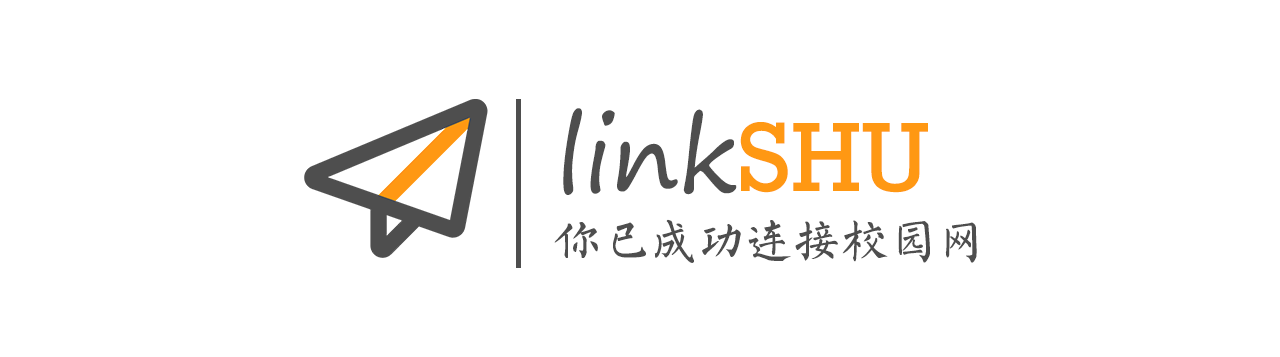
<style>
.page{position:relative;width:1280px;height:357px;background:#ffffff}
.page>*{position:absolute;margin:0}
.t1{font:100px "SegoePrint";color:#4e4e4e}
.t2{font:100px "Rockwell";color:#ff9813}
.t3{font:48px "FZSXSLKJW--GB1-0";color:#4e4e4e}
</style>
<div class="page">
<p class="t1" style="left:563px;top:108px;width:365px;height:87px">link<span class="t2">SHU</span></p>
<p class="t3" style="left:554px;top:219px;width:423px;height:44px">你已成功连接校园网</p>
</div>
